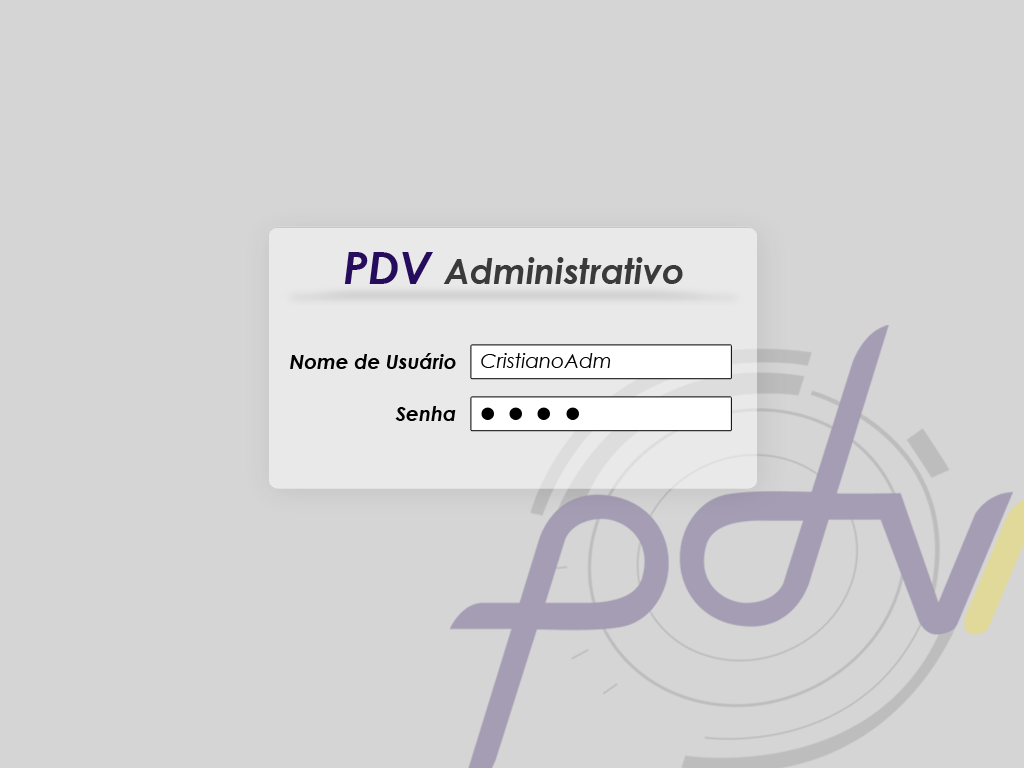
<style>
.page{position:relative;width:1024px;height:768px;background:#d5d5d5}
.page>*{position:absolute;margin:0}
.t1{font:35px "CenturyGothic-BoldItalic";color:#3a3a3a}
.t2{font:45px "CenturyGothic-BoldItalic";color:#260c5d}
.t3{font:20px "CenturyGothic-BoldItalic";color:#000000}
.t4{font:20px "CenturyGothic-Italic";color:#000000}
</style>
<div class="page">
<p class="t1" style="left:344px;top:252px;width:339px;height:32px"><span class="t2">PDV </span>Administrativo</p>
<p class="t3" style="left:290px;top:353px;width:166px;height:16px">Nome de Usuário</p>
<p class="t4" style="left:481px;top:353px;width:130px;height:15px">CristianoAdm</p>
<p class="t3" style="left:395px;top:406px;width:61px;height:15px">Senha</p>
</div>
